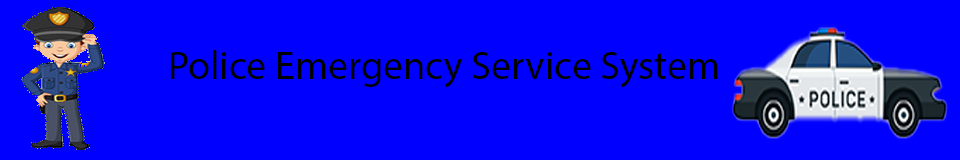
<style>
.page{position:relative;width:960px;height:160px;background:#0000ff}
.page>*{position:absolute;margin:0}
.t1{font:40px "MyriadPro-Regular";color:#000000}
</style>
<div class="page">
<p class="t1" style="left:171px;top:50px;width:547px;height:38px">Police Emergency Service System</p>
</div>
